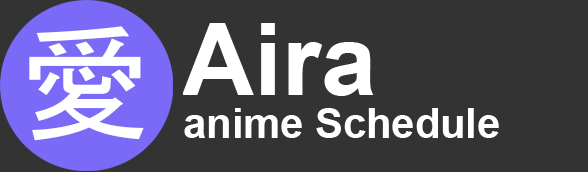
<style>
.page{position:relative;width:588px;height:172px;background:#333333}
.page>*{position:absolute;margin:0}
.t1{font:130px "MS-Gothic";color:#ffffff}
.t2{font:41.7px "Arial-BoldMT";color:#ffffff}
</style>
<div class="page">
<p class="t1" style="left:29px;top:26px;width:115px;height:115px">愛</p>
<p class="t2" style="left:184px;top:108px;width:315px;height:30px">anime Schedule</p>
</div>
